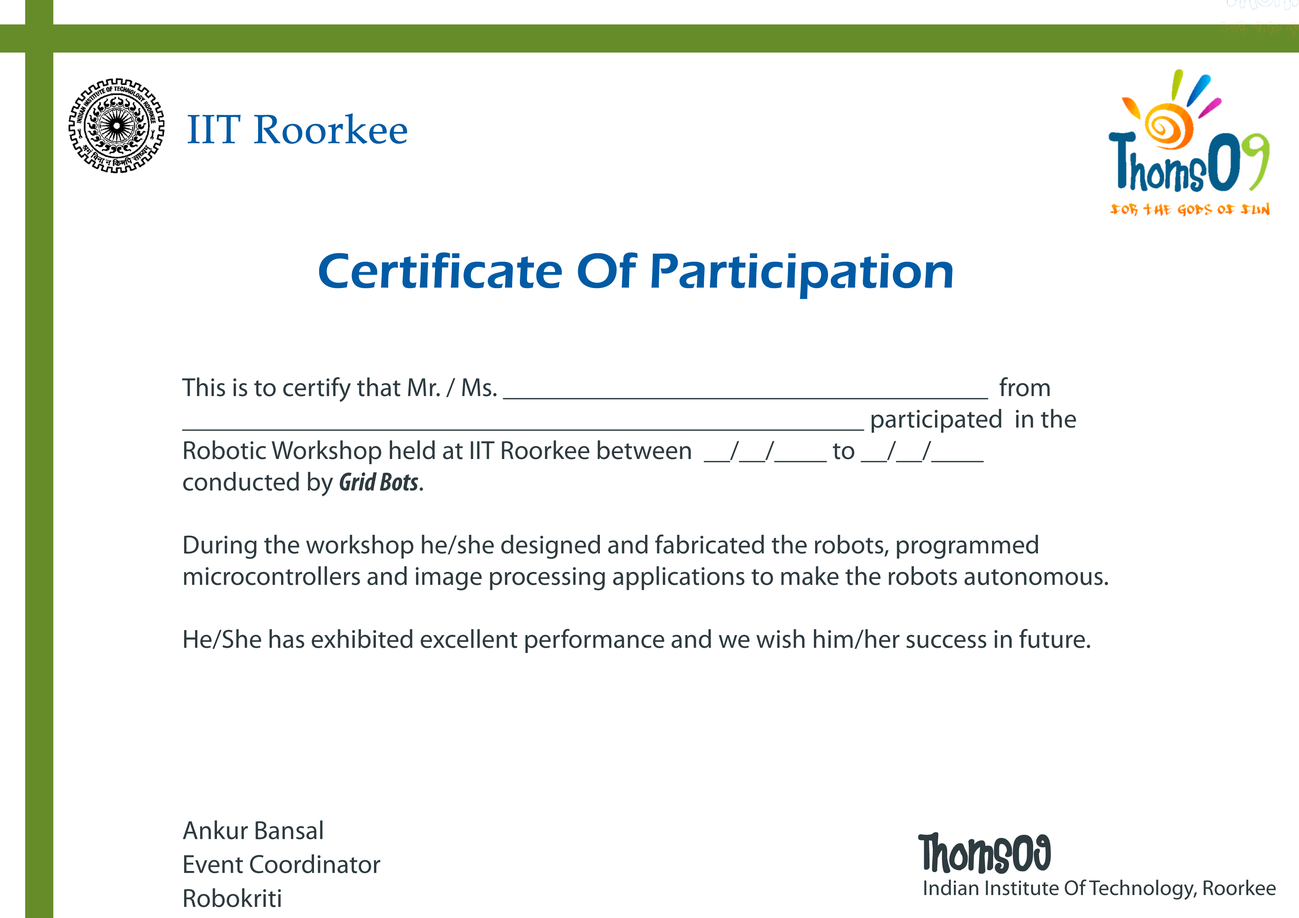
<style>
.page{position:relative;width:1299px;height:918px;background:#ffffff}
.page>*{position:absolute;margin:0}
.t1{font:40.4px "BookAntiqua";color:#005ba5;font-weight:bold}
.t2{font:50.9px "ErasITC-Demi";color:#005ba5}
.t3{font:26.2px "MyriadPro-Regular";color:#2e3b40}
.t4{font:26.2px "MyriadPro-BoldCondIt";color:#2e3b40}
.t5{font:26.2px/33.9px "MyriadPro-Regular";color:#2e3b40}
.t6{font:21.6px "MyriadPro-Regular";color:#2e3b40}
.t7{font:41.6px "Heartbreaker";color:#2e3b40}
</style>
<div class="page">
<p class="t1" style="left:188px;top:113px;width:219px;height:31px">IIT Roorkee</p>
<p class="t2" style="left:319px;top:252px;width:633px;height:47px">Certificate Of Participation</p>
<p class="t3" style="left:182px;top:377px;width:926px;height:530px">This is to certify that Mr. / Ms. _____________________________________  from <br>____________________________________________________ participated  in the <br>Robotic Workshop held at IIT Roorkee between  __/__/____ to __/__/____<br>conducted by <span class="t4">Grid Bots</span>.<br><br>During the workshop he/she designed and fabricated the robots, programmed <br>microcontrollers and image processing applications to make the robots autonomous.<br><br>He/She has exhibited excellent performance and we wish him/her success in future.<br><br><br><br><br><br><span class="t5">Ankur Bansal<br>Event Coordinator            <br>Robokriti</span></p>
<p class="t6" style="left:918px;top:832px;width:358px;height:68px"><span class="t7">ThomsO9<br></span>Indian Institute Of Technology, Roorkee</p>
</div>
